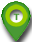
<style>
.page{position:relative;width:32px;height:42px}
.page>*{position:absolute;margin:0}
.t1{font:8.8px "Verdana-Bold";color:#489935}
</style>
<div class="page">
<p class="t1" style="left:13px;top:13px;width:7px;height:8px">T</p>
</div>
